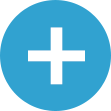
<style>
.page{position:relative;width:111px;height:111px;background:#31a2d0}
.page>*{position:absolute;margin:0}
.t1{font:110px "HelveticaNeueCyr-Medium";letter-spacing:0.05em;color:#ffffff}
</style>
<div class="page">
<p class="t1" style="left:28px;top:27px;width:57px;height:58px">+</p>
</div>
